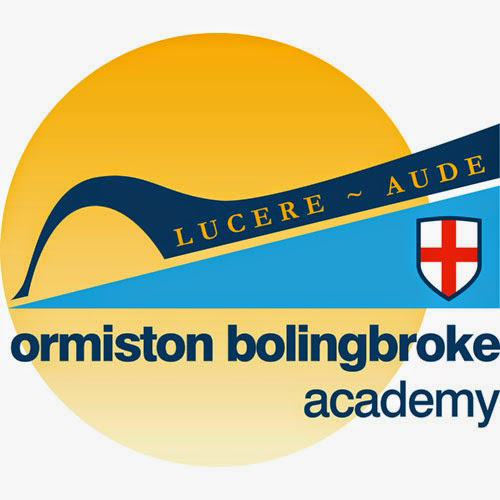
<style>
.page{position:relative;width:500px;height:500px;background:#f7f7f7}
.page>*{position:absolute;margin:0}
.t1{font:52.2px "Arial-Black";letter-spacing:-0.05em;color:#0b3357;scale:0.9 1}
.t2{font:50px "ArialMT";letter-spacing:-0.05em;color:#0b3357;scale:1.05 1}
</style>
<div class="page">
<p class="t1" style="left:9px;top:324px;width:491px;height:49px">ormiston bolingbroke</p>
<p class="t2" style="left:305px;top:381px;width:194px;height:46px">academy</p>
</div>
